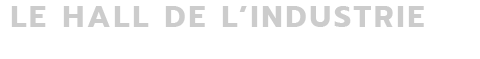
<style>
.page{position:relative;width:480px;height:59px;background:#ffffff}
.page>*{position:absolute;margin:0}
.t1{font:30px "Prompt-Bold";letter-spacing:0.1em;color:#cccccc;text-transform:uppercase}
</style>
<div class="page">
<p class="t1" style="left:11px;top:6px;width:413px;height:21px">LE Hall de l’industrie</p>
</div>
